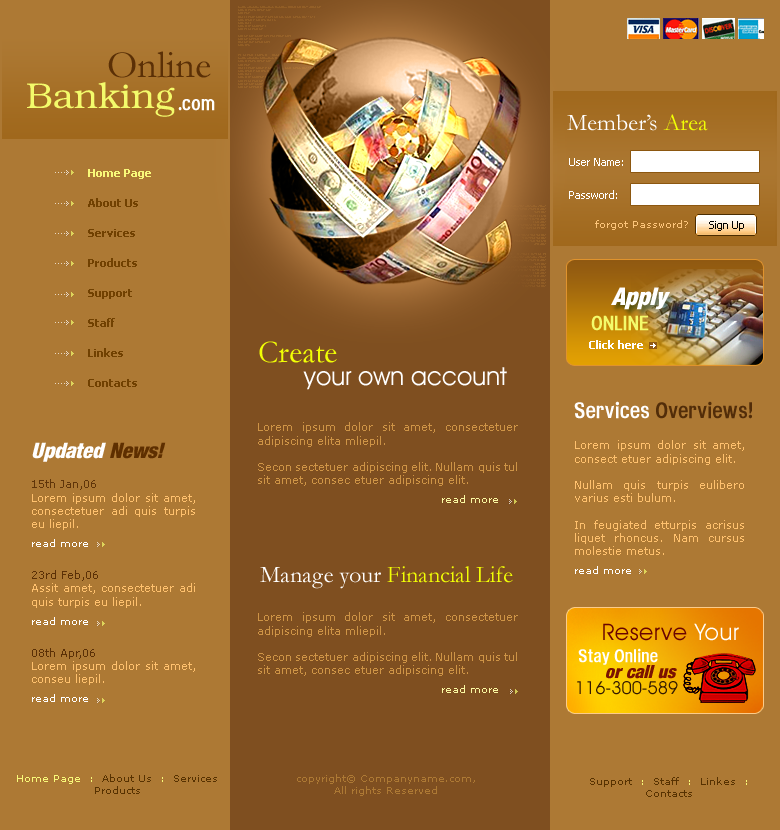
<style>
.page{position:relative;width:780px;height:830px;background:#ad7934}
.page>*{position:absolute;margin:0}
.t1{font:39px "Garamond";color:#5b3006}
.t2{font:36px "Bookman";color:#f3fb6b}
.t3{font:20px "HeadacheNormal";color:#ffffff}
.t4{font:24px "Garamond";color:#ffffff}
.t5{font:24px "Garamond";color:#f1ff05}
.t6{font:11px/33px "Tahoma";color:#ffffff}
.t7{font:11px/30px "Tahoma-Bold";color:#714101}
.t8{font:11px/30px "Tahoma-Bold";color:#f8f979}
.t9{font:10px "Verdana";color:#fdc57a}
.t10{font:24px "HarvestItal";color:#ffffff}
.t11{font:20px "HeadacheNormal";color:#f3fb6b}
.t12{font:32px "Garamond";color:#f1ff05}
.t13{font:11px "Tahoma-Bold";color:#ffffff}
.t14{font:25px "AvantGardeITCbyBT-Book";color:#ffffff}
.t15{font:22px "HeadacheNormal";color:#522d09}
.t16{font:22px "HeadacheNormal";color:#ffffff}
.t17{font:11px "Verdana";color:#ce9446}
.t18{font:10px/19px "Verdana";color:#faf8a2}
.t19{font:21px "HarvestItal";color:#ffffff}
.t20{font:21px "HarvestItal";color:#5e2f00}
.t21{font:11px "Verdana";color:#ffc16e}
.t22{font:10px/19px "Verdana";color:#ffffff}
.t23{font:11px "Verdana";color:#603509}
.t24{font:11px "Verdana";color:#5b3006}
.t25{font:23px "AvantGardeITCbyBT-Book";letter-spacing:0.03em;color:#690301}
.t26{font:23px "AvantGardeITCbyBT-Book";letter-spacing:0.03em;color:#ffffff}
.t27{font:18px "HeadacheNormal";color:#ffffff}
.t28{font:18px "HarvestItal";color:#7b1201}
.t29{font:18px "AvantGardeITCbyBT-Book";color:#341a00}
.t30{font:10px "Verdana";color:#573201}
.t31{font:10px "Verdana";color:#f8f979}
.t32{font:10px "Verdana";color:#ad7934}
</style>
<div class="page">
<p class="t1" style="left:108px;top:51px;width:103px;height:27px">Online</p>
<p class="t2" style="left:27px;top:82px;width:148px;height:35px">Banking</p>
<p class="t3" style="left:178px;top:99px;width:37px;height:12px">.com</p>
<p class="t4" style="left:567px;top:114px;width:141px;height:17px">Member’s <span class="t5">Area</span></p>
<p class="t6" style="left:569px;top:158px;width:54px;height:41px">User Name:<br>Password:</p>
<p class="t7" style="left:88px;top:169px;width:63px;height:218px;text-align:justify"><span class="t8">Home Page<br></span>About Us<br>Services<br>Products<br>Support<br>Staff <br>Linkes<br>Contacts</p>
<p class="t9" style="left:595px;top:220px;width:93px;height:10px">forgot Password?</p>
<p class="t10" style="left:611px;top:287px;width:59px;height:23px">Apply</p>
<p class="t11" style="left:591px;top:315px;width:58px;height:16px">ONLINE</p>
<p class="t12" style="left:259px;top:341px;width:78px;height:22px">Create</p>
<p class="t13" style="left:589px;top:340px;width:54px;height:9px">Click here</p>
<p class="t14" style="left:303px;top:367px;width:204px;height:23px">your own account</p>
<p class="t15" style="left:574px;top:401px;width:178px;height:18px"><span class="t16">Services </span>Overviews!</p>
<p class="t17" style="left:258px;top:422px;width:260px;height:81px;text-align:justify">Lorem ipsum dolor sit amet, consectetuer adipiscing elita mliepil.<br><br>Secon sectetuer adipiscing elit. Nullam quis tul sit amet, consec etuer adipiscing elit.<br>                                              <span class="t18">read more</span></p>
<p class="t19" style="left:32px;top:442px;width:134px;height:20px">Updated <span class="t20">News!</span></p>
<p class="t21" style="left:575px;top:440px;width:169px;height:134px;text-align:justify">Lorem ipsum dolor sit amet, consect etuer adipiscing elit.<br><br>Nullam quis turpis eulibero varius esti bulum.<br><br>In feugiated etturpis acrisus liquet rhoncus. Nam cursus molestie metus.<br><span class="t22">read more</span></p>
<p class="t21" style="left:32px;top:479px;width:163px;height:223px;text-align:justify"><span class="t23">15th Jan,06<br></span>Lorem ipsum dolor sit amet, consectetuer adi quis turpis eu liepil.<br><span class="t22">read more<br><br></span><span class="t24">23rd Feb,06<br></span>Assit amet, consectetuer adi quis turpis eu liepil.<br><span class="t22">read more<br><br></span><span class="t24">08th Apr,06<br></span>Lorem ipsum dolor sit amet, conseu liepil.<br><span class="t22">read more</span></p>
<p class="t5" style="left:260px;top:566px;width:253px;height:23px"><span class="t4">Manage your </span>Financial Life</p>
<p class="t17" style="left:258px;top:612px;width:260px;height:81px;text-align:justify">Lorem ipsum dolor sit amet, consectetuer adipiscing elita mliepil.<br><br>Secon sectetuer adipiscing elit. Nullam quis tul sit amet, consec etuer adipiscing elit.<br>                                              <span class="t18">read more</span></p>
<p class="t25" style="left:603px;top:623px;width:136px;height:18px">Reserve <span class="t26">Your</span></p>
<p class="t27" style="left:578px;top:648px;width:80px;height:17px">Stay Online</p>
<p class="t28" style="left:606px;top:665px;width:71px;height:14px">or call us</p>
<p class="t29" style="left:577px;top:681px;width:101px;height:14px">116-300-589</p>
<p class="t30" style="left:17px;top:774px;width:200px;height:20px;text-align:center"><span class="t31">Home Page  :  </span>About Us<span class="t31">  :  </span>Services  Products</p>
<p class="t32" style="left:297px;top:774px;width:178px;height:22px;text-align:center">copyright© Companyname.com,<br>All rights Reserved</p>
<p class="t30" style="left:590px;top:777px;width:157px;height:20px;text-align:center">Support<span class="t31">  :  </span>Staff<span class="t31">  :  </span>Linkes  <span class="t31">:  </span>Contacts</p>
</div>
